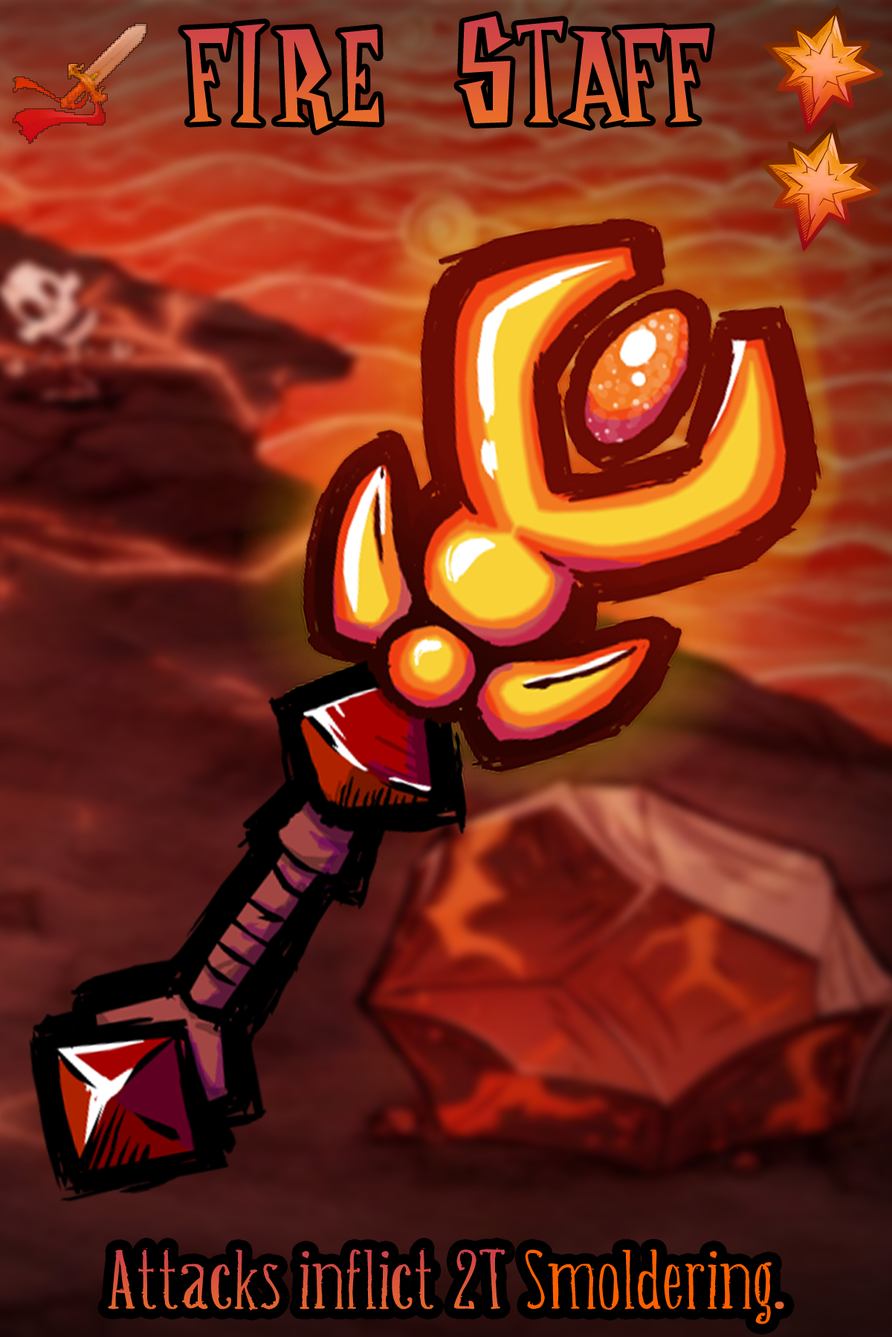
<style>
.page{position:relative;width:892px;height:1337px}
.page>*{position:absolute;margin:0}
.t1{font:250.4px "DontStarveNameFont";color:#db573a}
.t2{font:111.2px "Belisaplumillamanual";scale:1.47 1}
</style>
<div class="page">
<p class="t1" style="left:183px;top:16px;width:527px;height:115px">Fire Staff</p>
<p class="t2" style="left:108px;top:1248px;width:676px;height:77px">Attacks inflict 2T Smoldering.</p>
</div>
